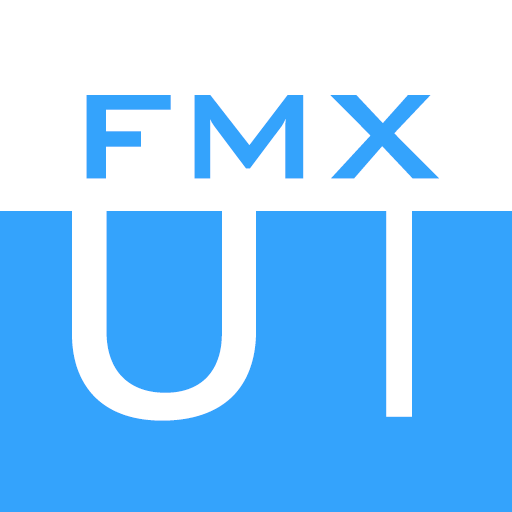
<style>
.page{position:relative;width:512px;height:512px;background:#34a3fc}
.page>*{position:absolute;margin:0}
.t1{font:161.2px "BankGothicBT-Medium";color:#34a3fc}
.t2{font:339.4px "EstrangeloEdessa";color:#ffffff;scale:1.05 1}
.t3{font:339.4px "CenturyGothic";color:#ffffff;scale:1.05 1}
</style>
<div class="page">
<p class="t1" style="left:86px;top:95px;width:353px;height:84px">FMX</p>
<p class="t2" style="left:72px;top:172px;width:340px;height:249px">U <span class="t3">I</span></p>
</div>
